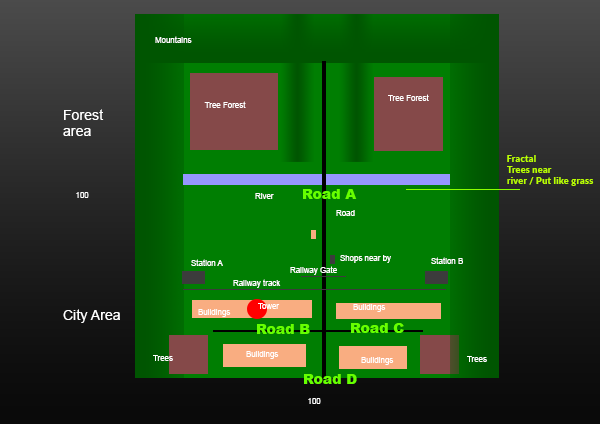
<style>
.page{position:relative;width:600px;height:424px}
.page>*{position:absolute;margin:0}
.t1{font:7.6px "ArialMT";letter-spacing:0.02em;color:#ffffff}
.t2{font:13.6px "ArialMT";letter-spacing:0.02em;color:#ffffff}
.t3{font:9.2px "Lato-Black";letter-spacing:0.02em;color:#baff00}
.t4{font:13.6px "Arial-Black";letter-spacing:0.02em;color:#66ff00}
</style>
<div class="page">
<p class="t1" style="left:155px;top:36px;width:37px;height:7px">Mountains</p>
<p class="t1" style="left:204px;top:101px;width:42px;height:7px">Tree Forest</p>
<p class="t1" style="left:388px;top:94px;width:41px;height:7px">Tree Forest</p>
<p class="t2" style="left:63px;top:109px;width:41px;height:27px">Forest<br>area</p>
<p class="t3" style="left:507px;top:155px;width:87px;height:31px">Fractal<br>Trees near<br>river / Put like grass</p>
<p class="t1" style="left:76px;top:192px;width:13px;height:6px">100</p>
<p class="t1" style="left:255px;top:193px;width:19px;height:6px">River</p>
<p class="t4" style="left:303px;top:189px;width:54px;height:10px">Road A</p>
<p class="t1" style="left:336px;top:210px;width:19px;height:6px">Road</p>
<p class="t1" style="left:340px;top:255px;width:51px;height:8px">Shops near by</p>
<p class="t1" style="left:431px;top:257px;width:32px;height:7px">Station B</p>
<p class="t1" style="left:191px;top:259px;width:32px;height:7px">Station A</p>
<p class="t1" style="left:290px;top:266px;width:47px;height:9px">Railway Gate</p>
<p class="t1" style="left:233px;top:279px;width:48px;height:9px">Railway track</p>
<p class="t1" style="left:258px;top:303px;width:22px;height:6px">Tower</p>
<p class="t1" style="left:353px;top:304px;width:33px;height:8px">Buildings</p>
<p class="t2" style="left:63px;top:309px;width:57px;height:14px">City Area</p>
<p class="t1" style="left:198px;top:309px;width:33px;height:8px">Buildings</p>
<p class="t4" style="left:257px;top:324px;width:53px;height:10px">Road B</p>
<p class="t4" style="left:351px;top:323px;width:53px;height:10px">Road C</p>
<p class="t1" style="left:246px;top:351px;width:33px;height:8px">Buildings</p>
<p class="t1" style="left:153px;top:355px;width:20px;height:6px">Trees</p>
<p class="t1" style="left:361px;top:357px;width:33px;height:8px">Buildings</p>
<p class="t1" style="left:467px;top:356px;width:20px;height:6px">Trees</p>
<p class="t4" style="left:304px;top:374px;width:53px;height:10px">Road D</p>
<p class="t1" style="left:308px;top:398px;width:13px;height:6px">100</p>
</div>
